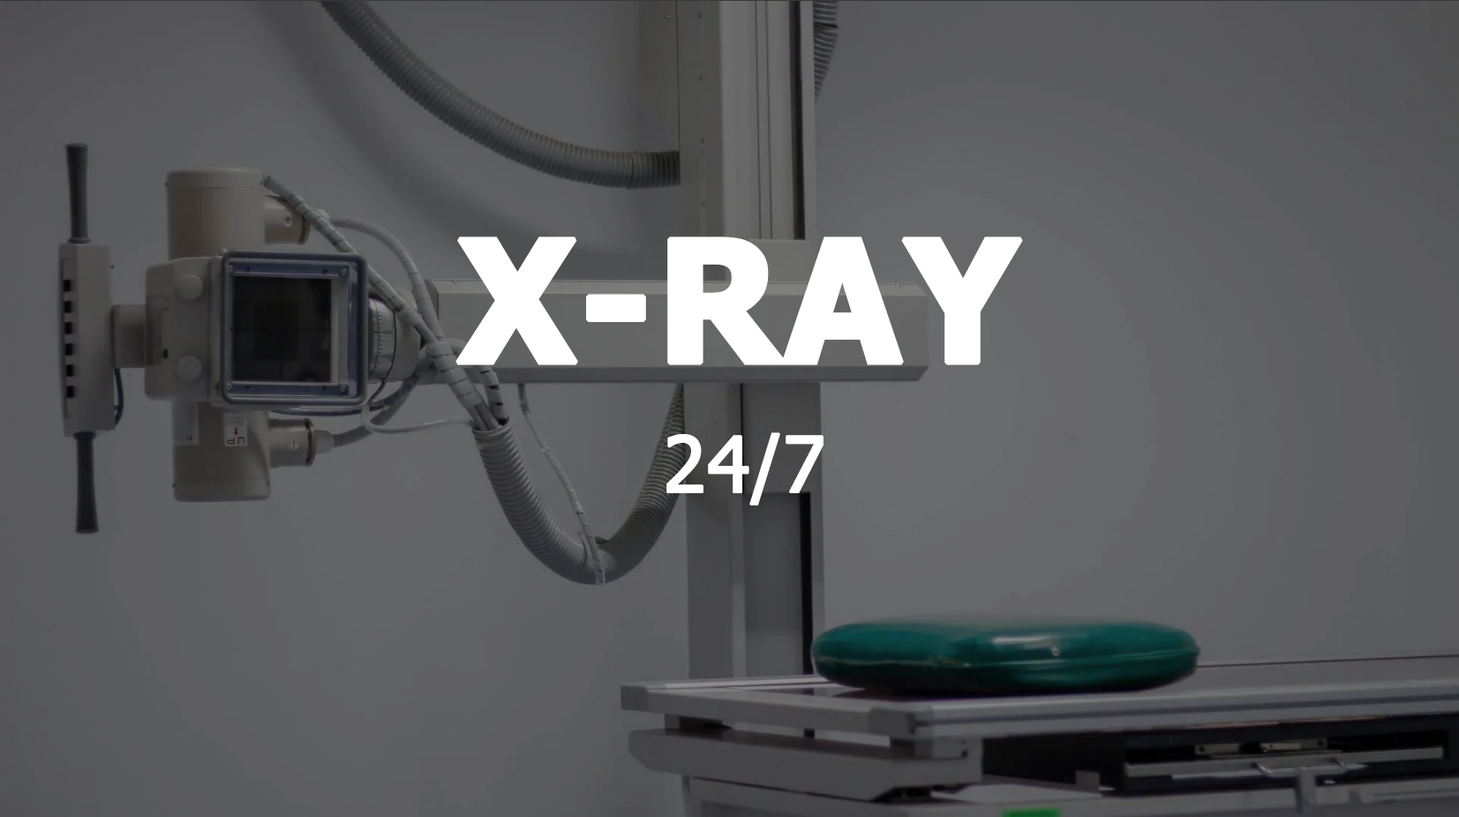
<style>
.page{position:relative;width:1459px;height:817px}
.page>*{position:absolute;margin:0}
.t1{font:169.5px "Tahoma-Bold";color:#ffffff;font-weight:bold}
.t2{font:76.8px "Tahoma";color:#ffffff;font-weight:bold}
</style>
<div class="page">
<p class="t1" style="left:455px;top:237px;width:568px;height:128px">X-RAY</p>
<p class="t2" style="left:666px;top:432px;width:157px;height:74px">24/7</p>
</div>
